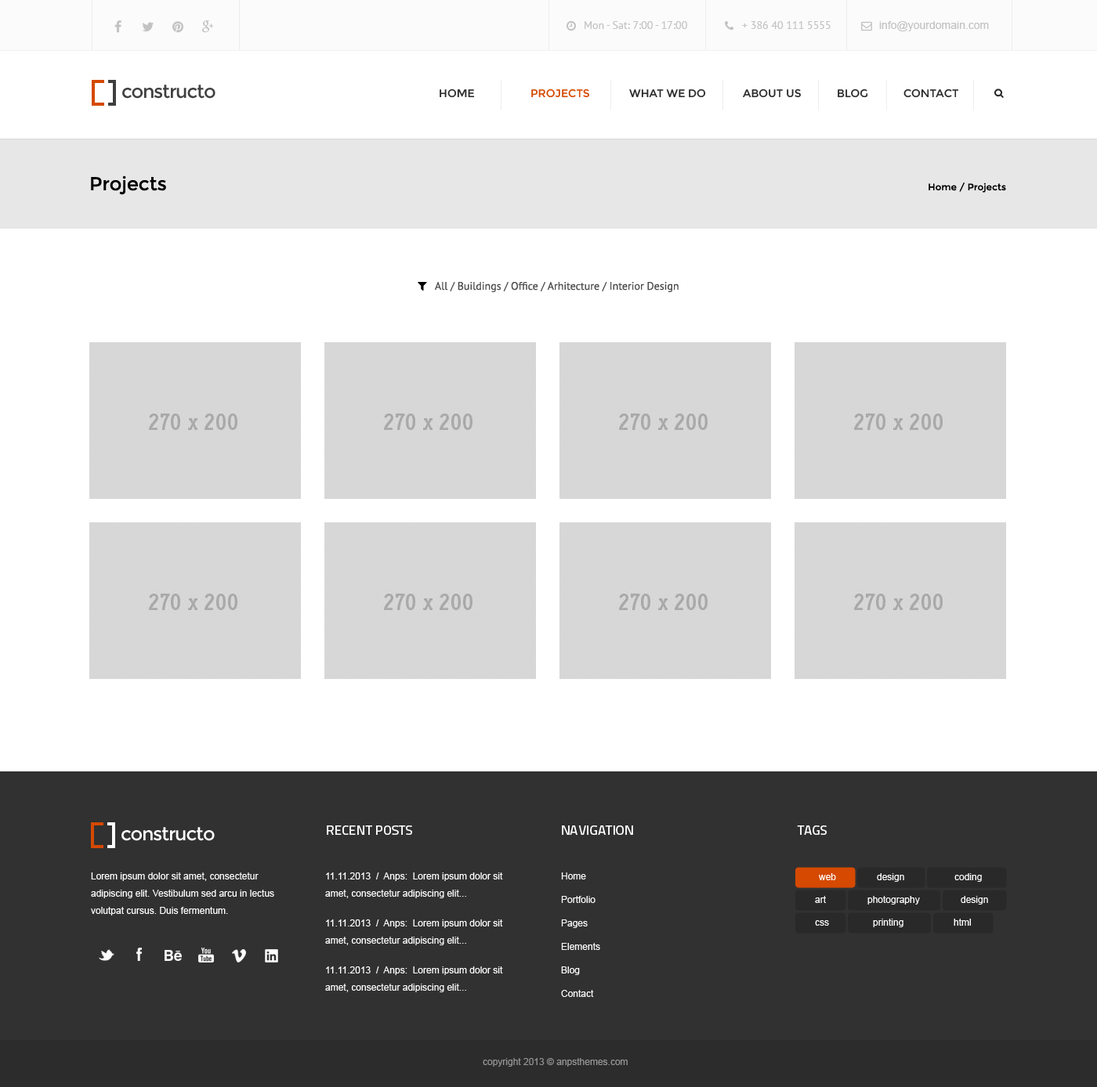
<style>
.page{position:relative;width:1097px;height:1087px;background:#ffffff}
.page>*{position:absolute;margin:0}
.t1{font:11px "PTSans-Regular";color:#c3c3c3}
.t2{font:11px "ArialMT";color:#c3c3c3}
.t3{font:11px "Montserrat-Regular";color:#292929}
.t4{font:11px "Montserrat-Regular";color:#d54900}
.t5{font:18.8px "Montserrat-Regular";color:#000000}
.t6{font:9.4px "Montserrat-Regular";color:#000000}
.t7{font:13.3px "TitilliumText22L-Medium";color:#ffffff}
.t8{font:9.4px/17.2px "ArialMT";color:#ffffff}
.t9{font:9.4px/23.5px "ArialMT";color:#ffffff}
.t10{font:9.4px "ArialMT";color:#ffffff}
.t11{font:9.4px "ArialMT";color:#969696}
</style>
<div class="page">
<p class="t1" style="left:584px;top:21px;width:103px;height:8px">Mon - Sat: 7:00 - 17:00</p>
<p class="t1" style="left:742px;top:21px;width:88px;height:8px">+ 386 40 111 5555</p>
<p class="t2" style="left:879px;top:21px;width:110px;height:10px">info@yourdomain.com</p>
<p class="t3" style="left:439px;top:89px;width:36px;height:9px">HOME</p>
<p class="t4" style="left:531px;top:89px;width:58px;height:9px">PROJECTS</p>
<p class="t3" style="left:629px;top:89px;width:77px;height:9px">WHAT WE DO</p>
<p class="t3" style="left:743px;top:89px;width:58px;height:9px">ABOUT US</p>
<p class="t3" style="left:837px;top:89px;width:31px;height:9px">BLOG</p>
<p class="t3" style="left:903px;top:89px;width:55px;height:9px">CONTACT</p>
<p class="t5" style="left:91px;top:175px;width:75px;height:20px">Projects</p>
<p class="t6" style="left:928px;top:183px;width:78px;height:10px">Home / Projects</p>
<p class="t7" style="left:327px;top:826px;width:85px;height:9px">RECENT POSTS</p>
<p class="t7" style="left:562px;top:826px;width:71px;height:9px">NAVIGATION</p>
<p class="t7" style="left:797px;top:826px;width:29px;height:9px">TAGS</p>
<p class="t8" style="left:91px;top:873px;width:183px;height:43px">Lorem ipsum dolor sit amet, consectetur <br>adipiscing elit. Vestibulum sed arcu in lectus volutpat cursus. Duis fermentum.</p>
<p class="t8" style="left:325px;top:873px;width:178px;height:26px">11.11.2013  /  Anps:  Lorem ipsum dolor sit amet, consectetur adipiscing elit...</p>
<p class="t9" style="left:561px;top:873px;width:39px;height:124px">Home<br>Portfolio<br>Pages<br>Elements<br>Blog<br>Contact</p>
<p class="t10" style="left:819px;top:873px;width:17px;height:7px">web</p>
<p class="t10" style="left:877px;top:873px;width:27px;height:9px">design</p>
<p class="t10" style="left:954px;top:873px;width:28px;height:9px">coding</p>
<p class="t10" style="left:815px;top:896px;width:11px;height:7px">art</p>
<p class="t10" style="left:867px;top:896px;width:53px;height:9px">photography</p>
<p class="t10" style="left:960px;top:896px;width:28px;height:9px">design</p>
<p class="t8" style="left:325px;top:920px;width:178px;height:26px">11.11.2013  /  Anps:  Lorem ipsum dolor sit amet, consectetur adipiscing elit...</p>
<p class="t10" style="left:815px;top:920px;width:14px;height:6px">css</p>
<p class="t10" style="left:873px;top:919px;width:30px;height:8px">printing</p>
<p class="t10" style="left:953px;top:919px;width:18px;height:7px">html</p>
<p class="t8" style="left:325px;top:967px;width:178px;height:26px">11.11.2013  /  Anps:  Lorem ipsum dolor sit amet, consectetur adipiscing elit...</p>
<p class="t11" style="left:483px;top:1058px;width:144px;height:9px">copyright 2013 © anpsthemes.com</p>
</div>
